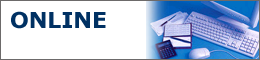
<style>
.page{position:relative;width:260px;height:60px;background:#ffffff}
.page>*{position:absolute;margin:0}
.t1{font:22px "Verdana-Bold";color:#003163}
</style>
<div class="page">
<p class="t1" style="left:11px;top:11px;width:95px;height:18px">ONLINE</p>
</div>
